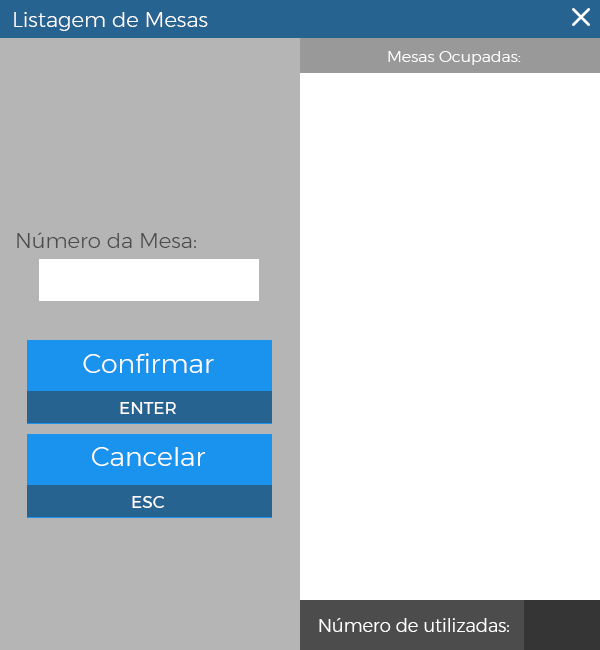
<style>
.page{position:relative;width:600px;height:650px;background:#ffffff}
.page>*{position:absolute;margin:0}
.t1{font:21.2px "Montserrat-Light";color:#ffffff}
.t2{font:15.9px "Montserrat-Light";color:#ffffff}
.t3{font:21.2px "Montserrat-Light";color:#4c4c4c}
.t4{font:26.8px "Montserrat-Light";color:#ffffff}
.t5{font:16.8px "Montserrat-Regular";color:#ffffff}
.t6{font:18px "Montserrat-Light";color:#ffffff}
</style>
<div class="page">
<p class="t1" style="left:14px;top:12px;width:194px;height:19px">Listagem de Mesas</p>
<p class="t2" style="left:388px;top:51px;width:133px;height:14px">Mesas Ocupadas:</p>
<p class="t3" style="left:17px;top:232px;width:179px;height:16px">Número da Mesa:</p>
<p class="t4" style="left:83px;top:353px;width:131px;height:20px">Confirmar</p>
<p class="t5" style="left:120px;top:402px;width:56px;height:12px">ENTER</p>
<p class="t4" style="left:92px;top:447px;width:114px;height:19px">Cancelar</p>
<p class="t5" style="left:132px;top:496px;width:33px;height:12px">ESC</p>
<p class="t6" style="left:319px;top:618px;width:190px;height:14px">Número de utilizadas:</p>
</div>
